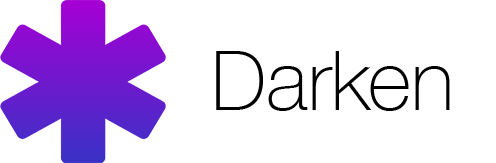
<style>
.page{position:relative;width:496px;height:163px;background:#ffffff}
.page>*{position:absolute;margin:0}
.t1{font:83px "HelveticaNeue-Thin";color:#000000}
</style>
<div class="page">
<p class="t1" style="left:216px;top:51px;width:234px;height:60px">Darken</p>
</div>
